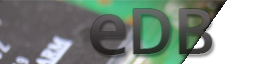
<style>
.page{position:relative;width:260px;height:64px}
.page>*{position:absolute;margin:0}
.t1{font:72px "LucidaConsole"}
</style>
<div class="page">
<p class="t1" style="left:91px;top:9px;width:122px;height:46px">eDB</p>
</div>
